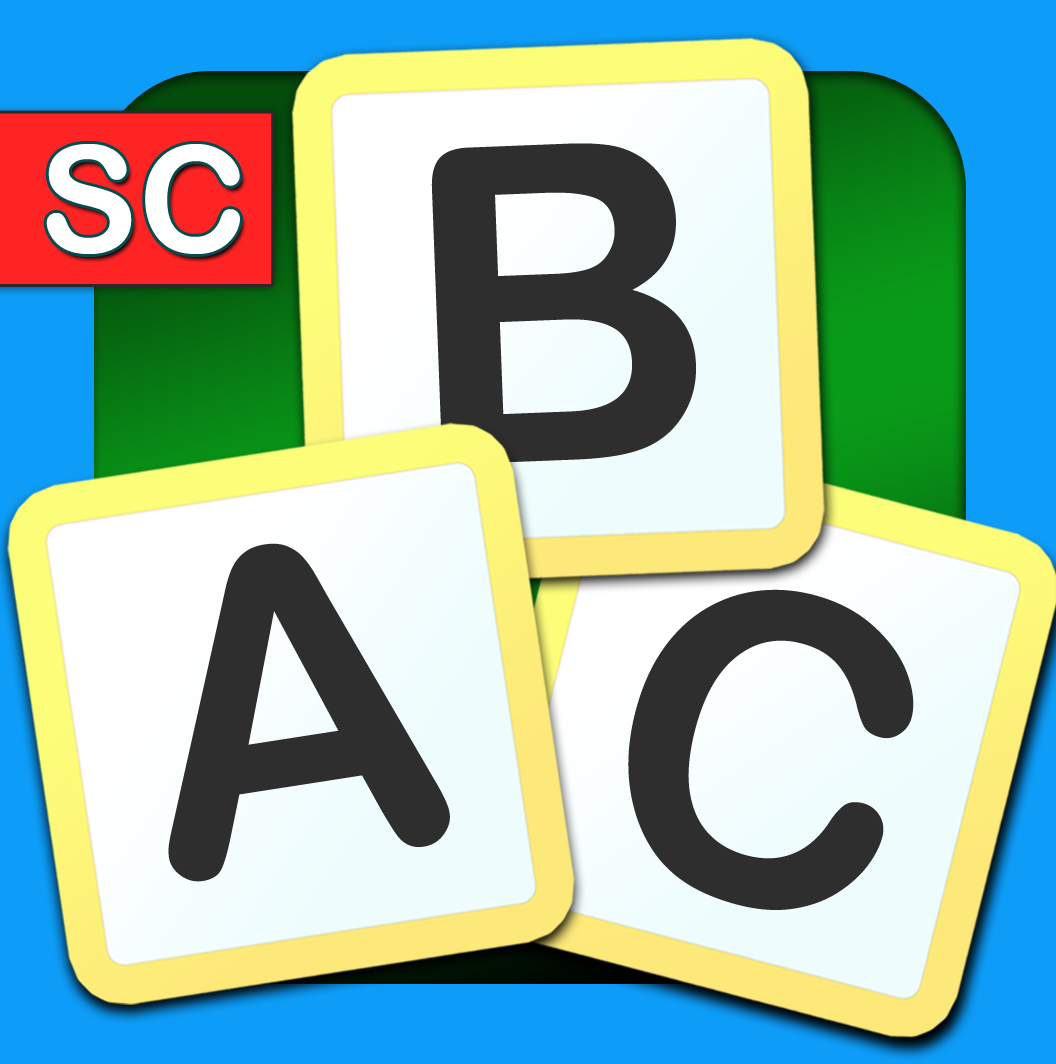
<style>
.page{position:relative;width:1056px;height:1064px}
.page>*{position:absolute;margin:0}
.t1{font:148px "ArialRoundedMTBold";color:#ffffff}
.t2{font:441.1px "ArialRoundedMTBold";color:#2e2e2f}
.t3{font:436.1px "ArialRoundedMTBold";color:#2e2e2f}
.t4{font:430.6px "ArialRoundedMTBold";color:#2e2e2f}
</style>
<div class="page">
<p class="t1" style="left:46px;top:144px;width:194px;height:110px">SC</p>
<p class="t2" style="left:431px;top:143px;width:265px;height:321px;rotate:-2deg">B</p>
<p class="t3" style="left:168px;top:543px;width:282px;height:339px;rotate:-9deg">A</p>
<p class="t4" style="left:628px;top:589px;width:286px;height:321px;rotate:15deg">C</p>
</div>
